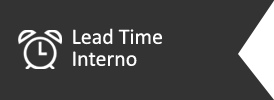
<style>
.page{position:relative;width:274px;height:100px;background:#333333}
.page>*{position:absolute;margin:0}
.t1{font:22.1px/21.9px "Calibri";color:#fffefe}
</style>
<div class="page">
<p class="t1" style="left:73px;top:28px;width:89px;height:38px">Lead Time<br>Interno</p>
</div>
